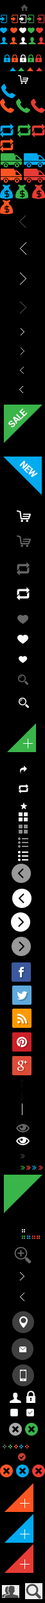
<style>
.page{position:relative;width:45px;height:1603px;background:#000000}
.page>*{position:absolute;margin:0}
.t1{font:9px "Roboto-Bold";color:#ffffff}
</style>
<div class="page">
<p class="t1" style="left:8px;top:408px;width:20px;height:20px;rotate:-45deg">SALE</p>
<p class="t1" style="left:19px;top:460px;width:19px;height:17px;rotate:45deg">NEW</p>
</div>
